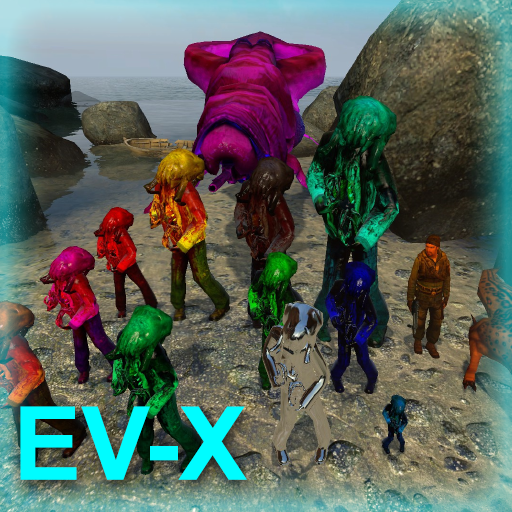
<style>
.page{position:relative;width:512px;height:512px}
.page>*{position:absolute;margin:0}
.t1{font:102.1px "Arial-BoldMT";color:#00fcff}
</style>
<div class="page">
<p class="t1" style="left:20px;top:406px;width:227px;height:74px">EV-X</p>
</div>
